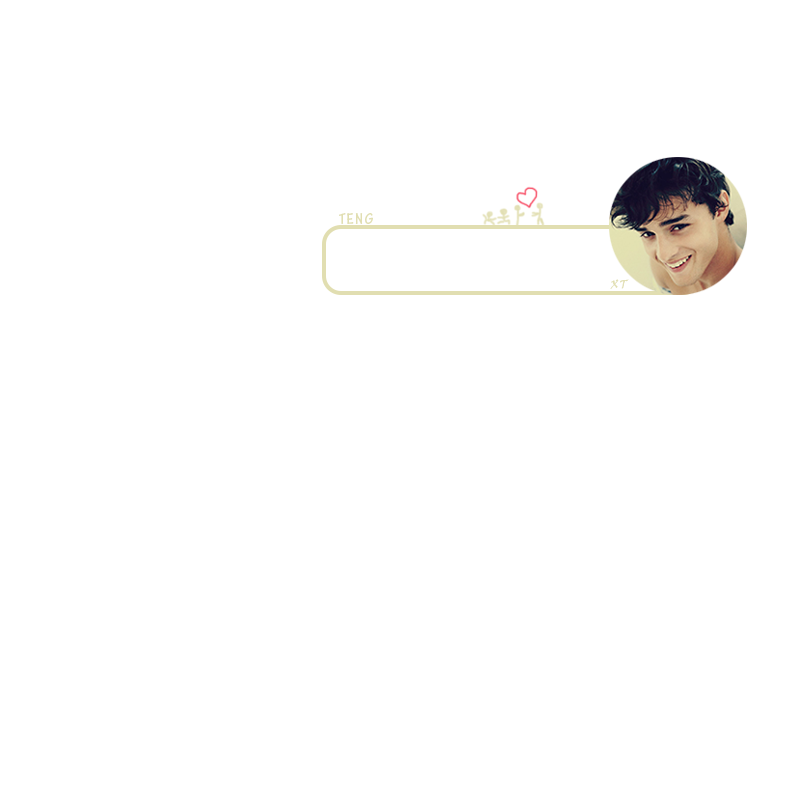
<style>
.page{position:relative;width:800px;height:800px;background:#ffffff}
.page>*{position:absolute;margin:0}
.t1{font:16px "TektonPro-BoldCond";letter-spacing:0.1em;color:#e1deb1}
.t2{font:12px "VinerHandITC";letter-spacing:0.1em;color:#e1deb1}
</style>
<div class="page">
<p class="t1" style="left:339px;top:213px;width:34px;height:11px">TENG</p>
<p class="t2" style="left:610px;top:279px;width:19px;height:10px">XT</p>
</div>
